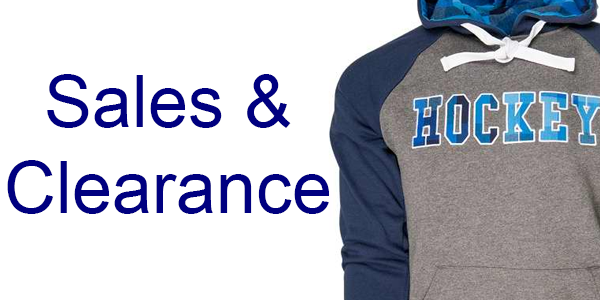
<style>
.page{position:relative;width:600px;height:300px;background:#ffffff}
.page>*{position:absolute;margin:0}
.t1{font:72px "ArialMT";color:#000080}
</style>
<div class="page">
<p class="t1" style="left:7px;top:74px;width:323px;height:140px;text-align:center">Sales &amp;<br>Clearance</p>
</div>
